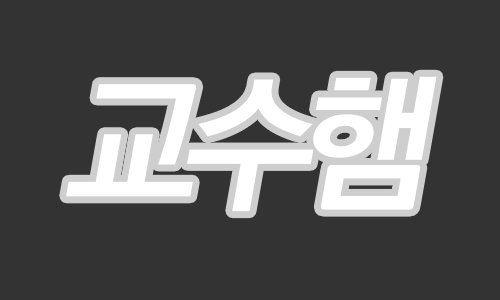
<style>
.page{position:relative;width:500px;height:300px;background:#333333}
.page>*{position:absolute;margin:0}
.t1{font:150px "KoPubDotumBold";letter-spacing:-0.1em;color:#ffffff;font-style:italic}
</style>
<div class="page">
<p class="t1" style="left:66px;top:76px;width:371px;height:136px">교수햄</p>
</div>
